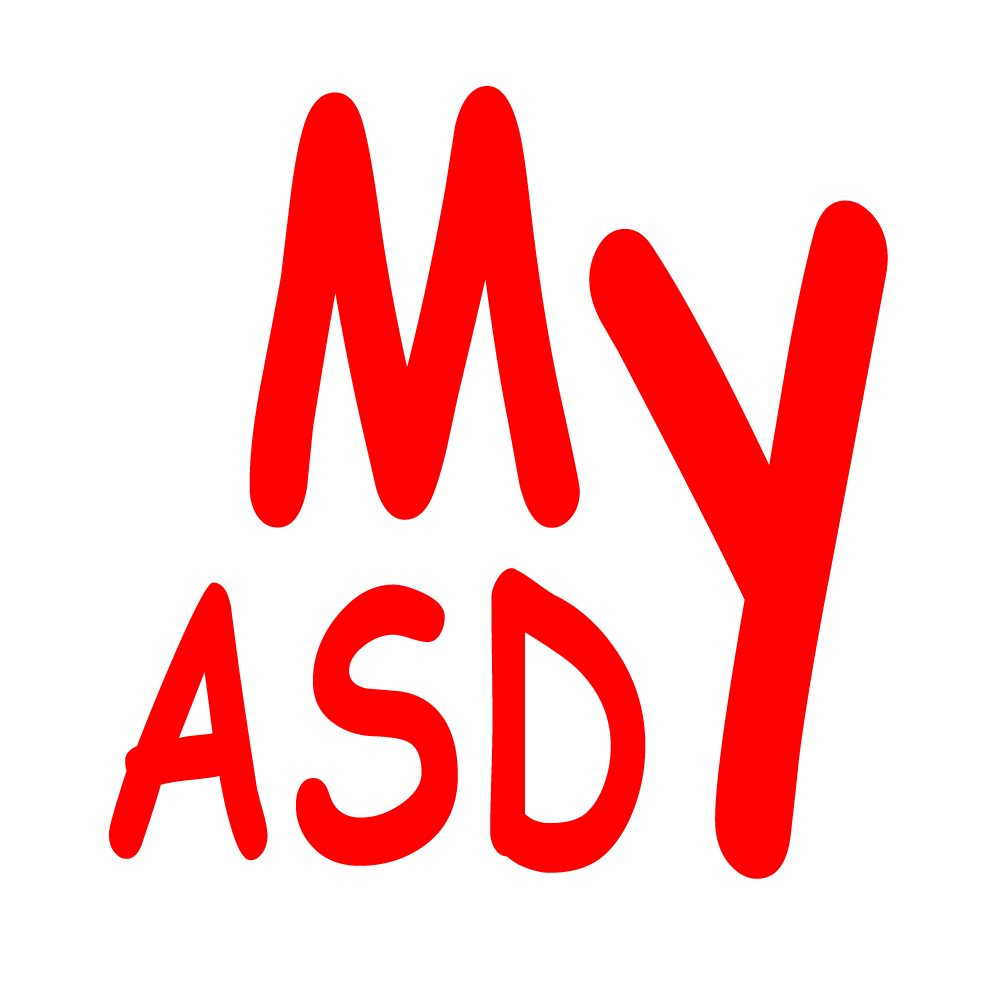
<style>
.page{position:relative;width:1000px;height:1000px;background:#ffffff}
.page>*{position:absolute;margin:0}
.t1{font:560.5px "ComicSansMS-Bold";letter-spacing:0.04em;color:#ff0000;scale:0.71 1}
.t2{font:837.8px "ComicSansMS-Bold";letter-spacing:0.04em;color:#ff0000;scale:0.66 1}
.t3{font:376.6px "ComicSansMS-Bold";letter-spacing:0.04em;color:#ff0000;scale:0.66 1}
</style>
<div class="page">
<p class="t1" style="left:249px;top:86px;width:331px;height:442px;rotate:-1deg">M</p>
<p class="t2" style="left:589px;top:200px;width:299px;height:679px;rotate:-7deg">y</p>
<p class="t3" style="left:109px;top:568px;width:537px;height:305px">ASD</p>
</div>
